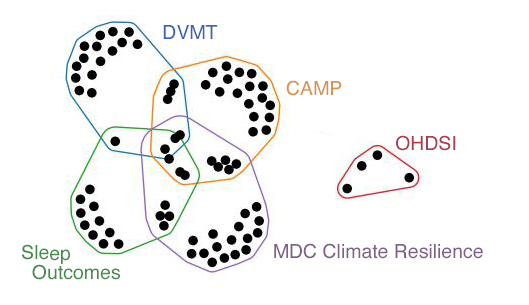
<style>
.page{position:relative;width:529px;height:305px;background:#ffffff}
.page>*{position:absolute;margin:0}
.t1{font:19.4px "Helvetica";color:#3e64b1}
.t2{font:19.4px "Helvetica";color:#d99050}
.t3{font:19.4px "Helvetica";color:#aa3d50}
.t4{font:19.4px "Helvetica";color:#488c4d}
.t5{font:19.4px "Helvetica";color:#806089}
</style>
<div class="page">
<p class="t1" style="left:163px;top:25px;width:55px;height:14px">DVMT</p>
<p class="t2" style="left:286px;top:80px;width:56px;height:16px">CAMP</p>
<p class="t3" style="left:396px;top:135px;width:60px;height:16px">OHDSI</p>
<p class="t4" style="left:22px;top:244px;width:98px;height:36px">Sleep<br>  Outcomes</p>
<p class="t5" style="left:274px;top:243px;width:209px;height:16px">MDC Climate Resilience</p>
</div>
